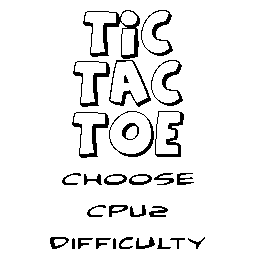
<style>
.page{position:relative;width:256px;height:256px;background:#ffffff}
.page>*{position:absolute;margin:0}
.t1{font:42px "AgentOrange";color:#000000}
.t2{font:27px "ComicBookCommandoExpanded";color:#000000}
</style>
<div class="page">
<p class="t1" style="left:72px;top:10px;width:112px;height:148px;text-align:center">TIC<br>TAC<br>TOE</p>
<p class="t2" style="left:50px;top:173px;width:155px;height:76px;text-align:center">Choose <br>CPU2<br>Difficulty</p>
</div>
